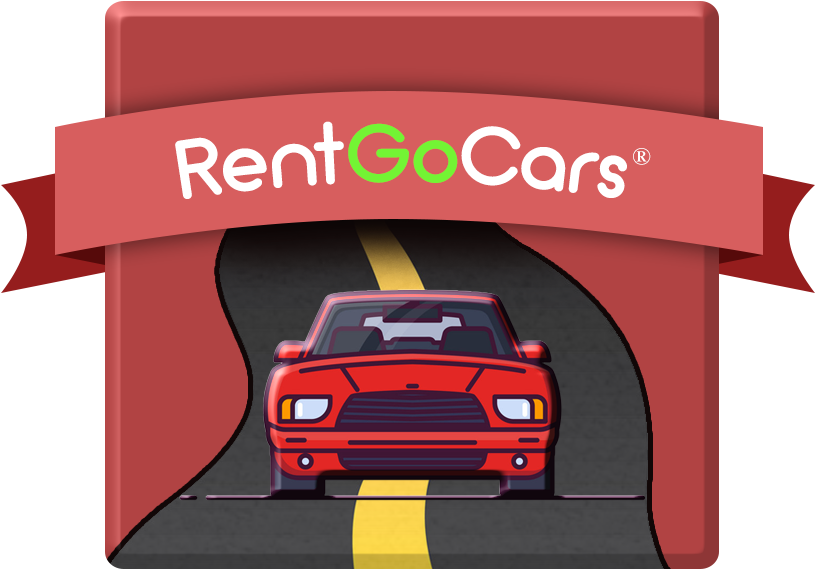
<style>
.page{position:relative;width:815px;height:570px;background:#ffffff}
.page>*{position:absolute;margin:0}
.t1{font:84px "Arciform";color:#ffffff}
.t2{font:84px "Arciform";color:#73f434}
.t3{font:24.6px "TimesNewRomanPSMT";color:#ffffff}
</style>
<div class="page">
<p class="t1" style="left:175px;top:121px;width:452px;height:78px">Rent<span class="t2">Go</span>Cars</p>
<p class="t3" style="left:633px;top:148px;width:18px;height:17px">®</p>
</div>
